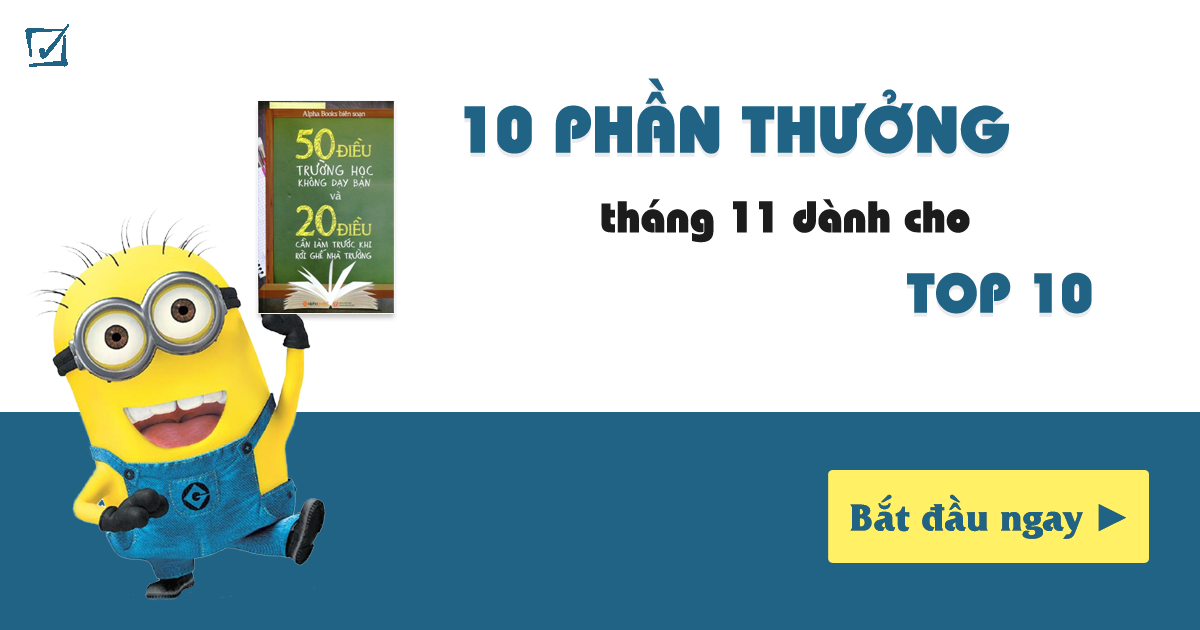
<style>
.page{position:relative;width:1200px;height:630px;background:#ffffff}
.page>*{position:absolute;margin:0}
.t1{font:66px "UVNBaiSauNang";color:#206385}
.t2{font:44px "UVNBaiSauNang";color:#1c1c1c}
.t3{font:56px "UVNBaiSauNang";color:#206385}
.t4{font:38px "UVNLacLongQuanBold";color:#206385}
.t5{font:38px "TimesNewRomanPSMT";color:#206385}
</style>
<div class="page">
<p class="t1" style="left:464px;top:78px;width:545px;height:76px">10 PHẦN THƯỞNG</p>
<p class="t2" style="left:601px;top:199px;width:369px;height:44px">tháng 11 dành cho</p>
<p class="t3" style="left:907px;top:272px;width:185px;height:42px">TOP 10</p>
<p class="t4" style="left:850px;top:494px;width:276px;height:45px">Bắt đầu ngay <span class="t5">►</span></p>
</div>
